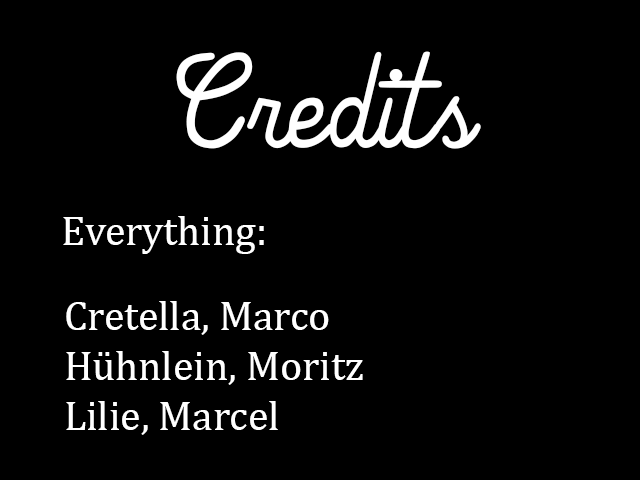
<style>
.page{position:relative;width:640px;height:480px;background:#000000}
.page>*{position:absolute;margin:0}
.t1{font:125px "ThatsFontFolksItalic";color:#ffffff}
.t2{font:41.7px "CambriaMath";color:#ffffff}
</style>
<div class="page">
<p class="t1" style="left:176px;top:51px;width:305px;height:98px">Credits</p>
<p class="t2" style="left:63px;top:216px;width:201px;height:38px">Everything:</p>
<p class="t2" style="left:66px;top:301px;width:297px;height:134px">Cretella, Marco<br>Hühnlein, Moritz<br>Lilie, Marcel</p>
</div>
